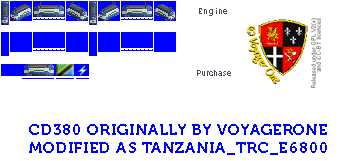
<style>
.page{position:relative;width:351px;height:161px;background:#ffffff}
.page>*{position:absolute;margin:0}
.t1{font:8px "Museo700-Regular";letter-spacing:0.075em;color:#444c5c}
.t2{font:8px "Museo700-Regular";color:#444c5c}
.t3{font:15px "Museo700-Regular";letter-spacing:0.075em;color:#0000ff;text-transform:uppercase}
</style>
<div class="page">
<p class="t1" style="left:199px;top:8px;width:28px;height:8px">Engine</p>
<p class="t2" style="left:197px;top:70px;width:34px;height:6px">Purchase</p>
<p class="t3" style="left:29px;top:124px;width:298px;height:31px">CD380 originally by voyagerone<br>modified as Tanzania_TRC_E6800</p>
</div>
